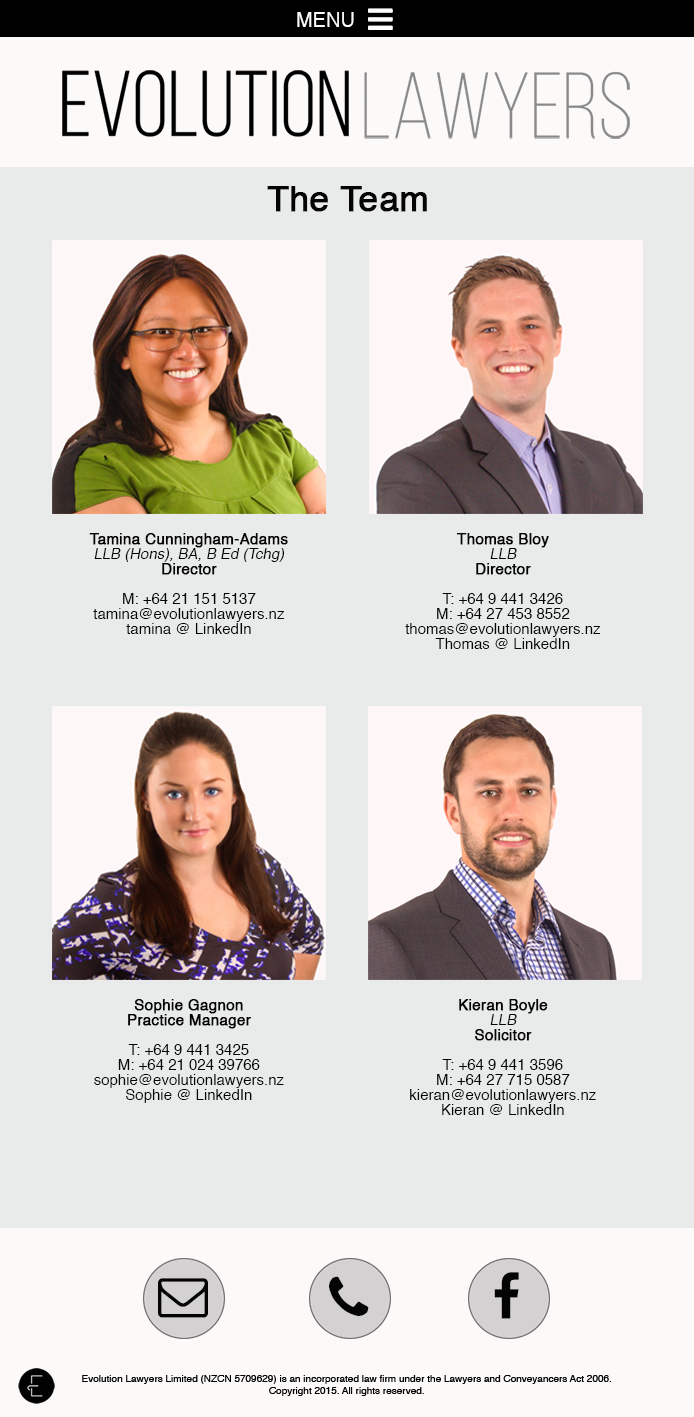
<style>
.page{position:relative;width:694px;height:1417px;background:#e9ebeb}
.page>*{position:absolute;margin:0}
.t1{font:20px "Helvetica";color:#fdfcfc}
.t2{font:35px "Helvetica";color:#040404;font-weight:bold}
.t3{font:15px/15px "Helvetica";color:#040404}
.t4{font:15px/15px "Helvetica";color:#040404;font-weight:bold}
.t5{font:15px/15px "Helvetica";color:#040404;font-style:italic}
</style>
<div class="page">
<p class="t1" style="left:297px;top:12px;width:57px;height:15px">MENU</p>
<p class="t2" style="left:267px;top:186px;width:160px;height:26px">The Team</p>
<p class="t3" style="left:89px;top:533px;width:199px;height:101px;text-align:center"><span class="t4">Tamina Cunningham-Adams<br></span><span class="t5">LLB (Hons), BA, B Ed (Tchg)<br></span><span class="t4">Director</span><br><br>M: +64 21 151 5137<br>tamina@evolutionlawyers.nz<br>tamina @ LinkedIn</p>
<p class="t3" style="left:405px;top:533px;width:196px;height:116px;text-align:center"><span class="t4">Thomas Bloy<br></span><span class="t5">LLB <br></span><span class="t4">Director<br><br></span>T: +64 9 441 3426<br>M: +64 27 453 8552<br>thomas@evolutionlawyers.nz<br>Thomas @ LinkedIn</p>
<p class="t3" style="left:94px;top:999px;width:190px;height:104px;text-align:center"><span class="t4">Sophie Gagnon<br>Practice Manager<br><br></span>T: +64 9 441 3425<br>M: +64 21 024 39766<br>sophie@evolutionlawyers.nz<br>Sophie @ LinkedIn</p>
<p class="t3" style="left:410px;top:999px;width:186px;height:116px;text-align:center"><span class="t4">Kieran Boyle<br></span><span class="t5">LLB <br></span><span class="t4">Solicitor<br><br></span>T: +64 9 441 3596<br>M: +64 27 715 0587<br>kieran@evolutionlawyers.nz<br>Kieran @ LinkedIn</p>
</div>
